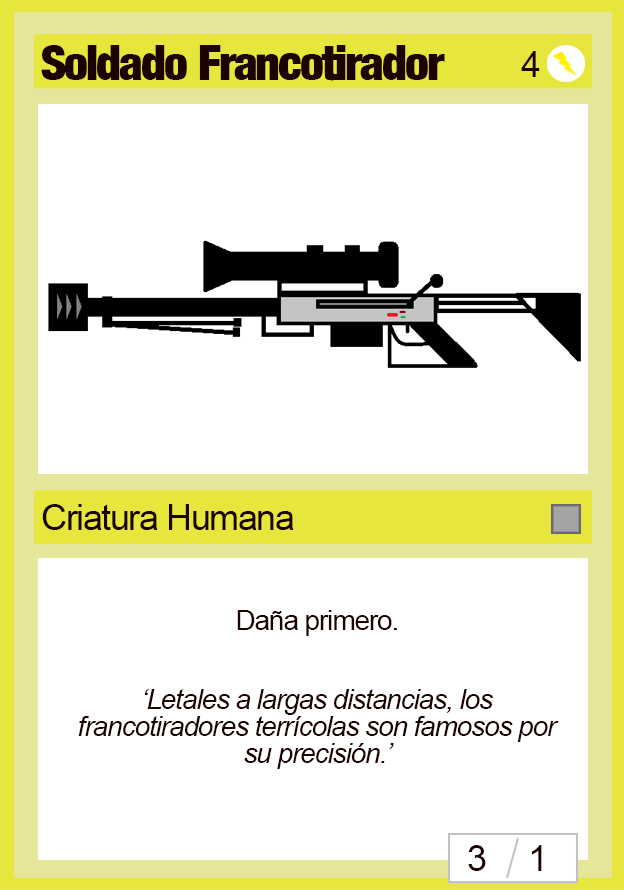
<style>
.page{position:relative;width:624px;height:890px;background:#ffffff}
.page>*{position:absolute;margin:0}
.t1{font:48px "Harvest";letter-spacing:-0.04em;color:#1d0202}
.t2{font:36px "ArialMT";letter-spacing:-0.04em;color:#1d0202}
.t3{font:28px "ArialMT";letter-spacing:-0.04em;color:#1d0202}
.t4{font:28px/27px "Arial-ItalicMT";letter-spacing:-0.04em;color:#1d0202}
</style>
<div class="page">
<p class="t1" style="left:41px;top:45px;width:404px;height:36px">Soldado Francotirador</p>
<p class="t2" style="left:521px;top:51px;width:19px;height:26px">4</p>
<p class="t2" style="left:42px;top:504px;width:252px;height:26px">Criatura Humana</p>
<p class="t3" style="left:237px;top:610px;width:160px;height:26px">Daña primero.</p>
<p class="t4" style="left:78px;top:689px;width:481px;height:80px;text-align:center">‘Letales a largas distancias, los francotiradores terrícolas son famosos por su precisión.’</p>
<p class="t2" style="left:468px;top:845px;width:18px;height:26px">3</p>
<p class="t2" style="left:531px;top:845px;width:11px;height:26px">1</p>
</div>
